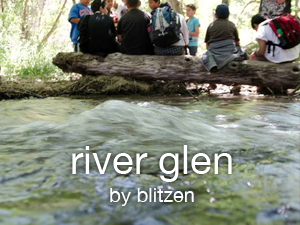
<style>
.page{position:relative;width:300px;height:225px}
.page>*{position:absolute;margin:0}
.t1{font:40px "HelveticaNeue";color:#ffffff}
.t2{font:20px "HelveticaNeue";color:#ffffff}
</style>
<div class="page">
<p class="t1" style="left:72px;top:145px;width:160px;height:37px">river glen</p>
<p class="t2" style="left:110px;top:188px;width:84px;height:18px">by blitzen</p>
</div>
